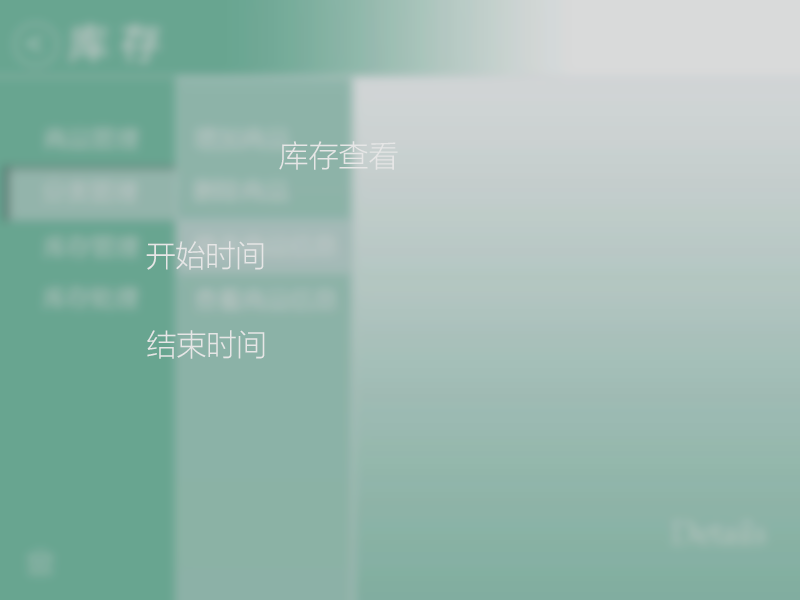
<style>
.page{position:relative;width:800px;height:600px}
.page>*{position:absolute;margin:0}
.t1{font:30px "MicrosoftYaHeiLight";color:#e6e6e6}
</style>
<div class="page">
<p class="t1" style="left:279px;top:141px;width:119px;height:29px">库存查看</p>
<p class="t1" style="left:146px;top:241px;width:118px;height:29px">开始时间</p>
<p class="t1" style="left:147px;top:330px;width:118px;height:29px">结束时间</p>
</div>
